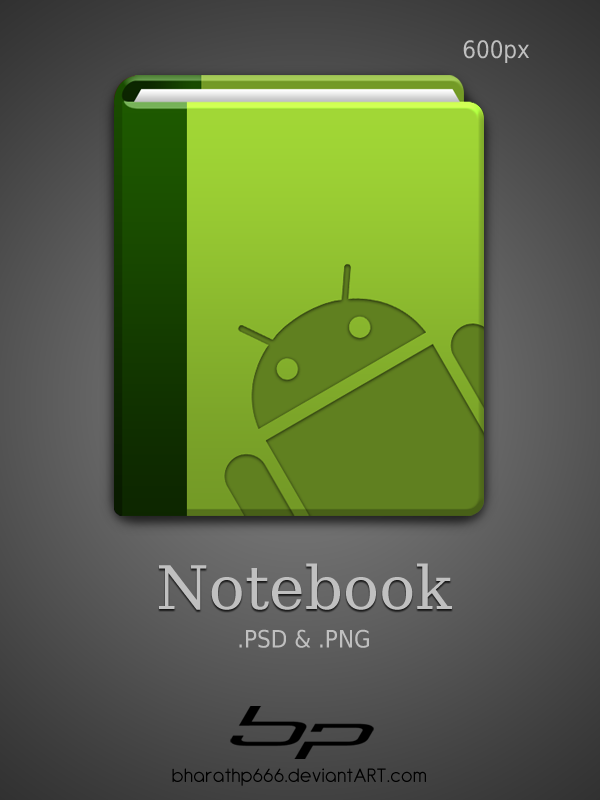
<style>
.page{position:relative;width:600px;height:800px}
.page>*{position:absolute;margin:0}
.t1{font:24px "DejaVuSansCondensed";color:#bfbfbf}
.t2{font:60px "DejaVuSerif";color:#c0c0c0}
.t3{font:21px "Antipasto";letter-spacing:0.05em;color:#000000}
</style>
<div class="page">
<p class="t1" style="left:463px;top:40px;width:66px;height:23px">600px</p>
<p class="t2" style="left:159px;top:563px;width:293px;height:47px">Notebook</p>
<p class="t1" style="left:239px;top:629px;width:130px;height:19px">.PSD &amp; .PNG</p>
<p class="t3" style="left:172px;top:768px;width:254px;height:18px">bharathp666.deviantART.com</p>
</div>
